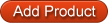
<style>
.page{position:relative;width:108px;height:23px}
.page>*{position:absolute;margin:0}
.t1{font:15px "ArialMT";color:#ffffff}
</style>
<div class="page">
<p class="t1" style="left:13px;top:3px;width:83px;height:18px">Add Product</p>
</div>
